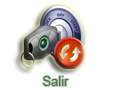
<style>
.page{position:relative;width:113px;height:90px;background:#ffffff}
.page>*{position:absolute;margin:0}
.t1{font:13px "ArialMT";color:#686161}
</style>
<div class="page">
<p class="t1" style="left:43px;top:76px;width:26px;height:10px">Salir</p>
</div>
